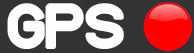
<style>
.page{position:relative;width:194px;height:53px;background:#333333}
.page>*{position:absolute;margin:0}
.t1{font:60px "LMAO";color:#fefeff}
</style>
<div class="page">
<p class="t1" style="left:7px;top:3px;width:117px;height:46px">GPS</p>
</div>
